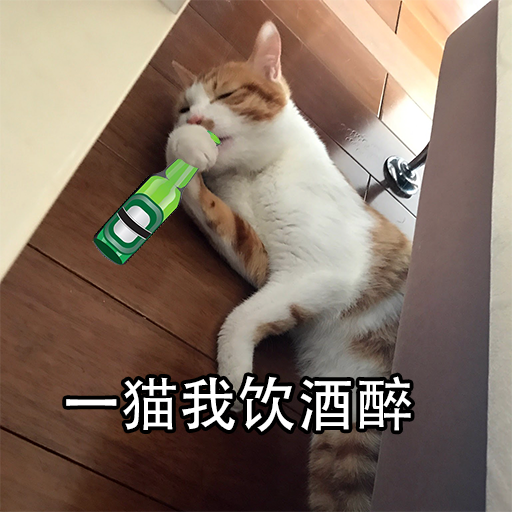
<style>
.page{position:relative;width:512px;height:512px}
.page>*{position:absolute;margin:0}
.t1{font:58.6px "AdobeHeitiStd-Regular";color:#ffffff}
</style>
<div class="page">
<p class="t1" style="left:66px;top:376px;width:346px;height:56px">一猫我饮酒醉</p>
</div>
